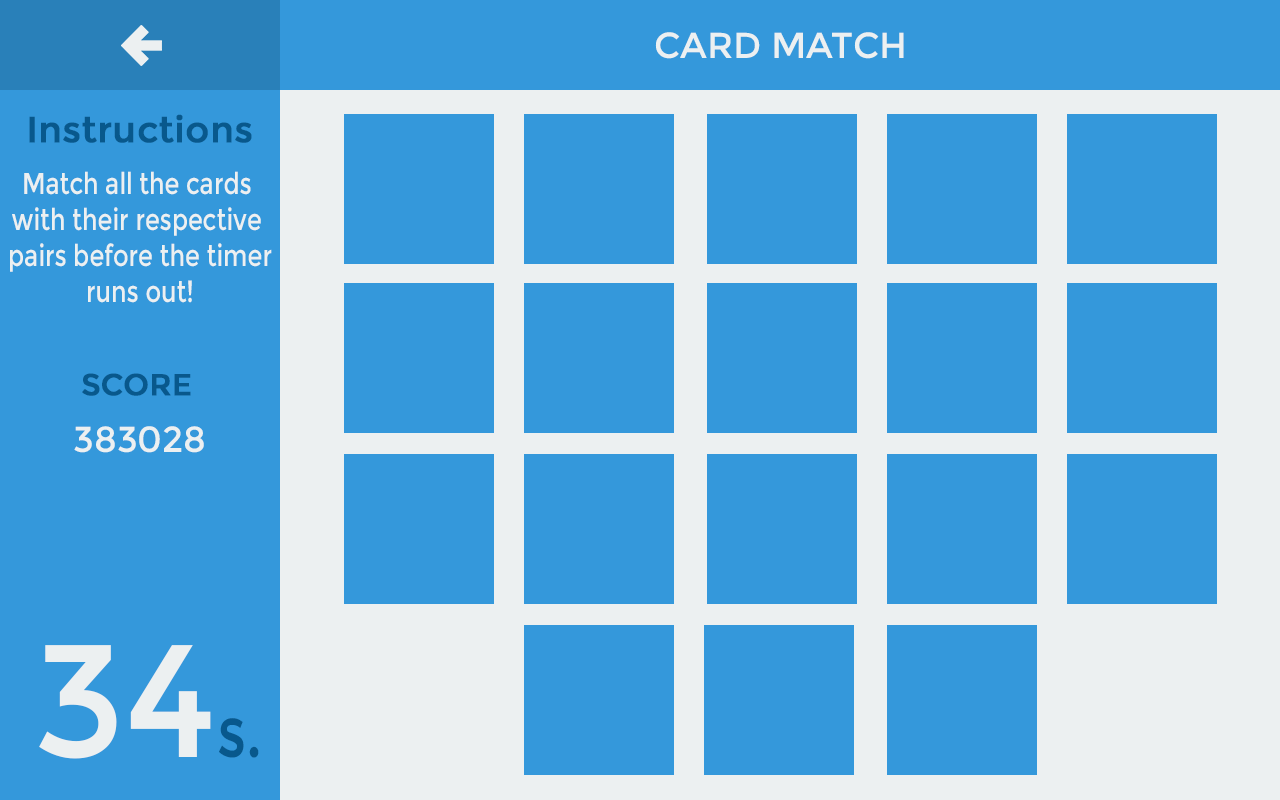
<style>
.page{position:relative;width:1280px;height:800px;background:#3498db}
.page>*{position:absolute;margin:0}
.t1{font:36px "Montserrat-Regular";color:#ecf0f1}
.t2{font:36px "Montserrat-Regular";color:#08588c;font-weight:bold}
.t3{font:30px "Montserrat-Regular";color:#ecf0f1;scale:0.8 1}
.t4{font:30px "Montserrat-Regular";color:#08588c;font-weight:bold}
.t5{font:160px "Montserrat-Regular";color:#ecf0f1}
.t6{font:72px "Montserrat-Regular";color:#08588c;scale:0.8 1}
</style>
<div class="page">
<p class="t1" style="left:655px;top:32px;width:249px;height:27px">CARD MATCH</p>
<p class="t2" style="left:29px;top:114px;width:223px;height:29px">Instructions</p>
<p class="t3" style="left:10px;top:171px;width:262px;height:132px;text-align:center">Match all the cards <br>with their respective <br>pairs before the timer<br>runs out!</p>
<p class="t4" style="left:82px;top:373px;width:109px;height:23px">SCORE</p>
<p class="t1" style="left:74px;top:426px;width:130px;height:27px">383028</p>
<p class="t5" style="left:39px;top:645px;width:172px;height:114px">34</p>
<p class="t6" style="left:219px;top:718px;width:40px;height:40px">s.</p>
</div>
